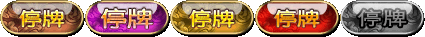
<style>
.page{position:relative;width:425px;height:37px}
.page>*{position:absolute;margin:0}
.t1{font:17.6px "STXihei";color:#868585;font-weight:bold;scale:1.38 1}
</style>
<div class="page">
<p class="t1" style="left:357px;top:9px;width:50px;height:18px">停牌</p>
</div>
